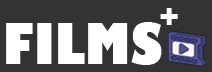
<style>
.page{position:relative;width:212px;height:72px;background:#333333}
.page>*{position:absolute;margin:0}
.t1{font:30px "GillSans-UltraBoldCondensed";color:#ffffff;scale:1.5 1}
.t2{font:55px "GillSans-UltraBoldCondensed";color:#ffffff;scale:1.15 1}
</style>
<div class="page">
<p class="t1" style="left:160px;top:8px;width:18px;height:17px">+</p>
<p class="t2" style="left:6px;top:22px;width:156px;height:43px">FILMS</p>
</div>
